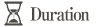
<style>
.page{position:relative;width:108px;height:27px;background:#ffffff}
.page>*{position:absolute;margin:0}
.t1{font:18px "RyuminPro-ExBold";letter-spacing:-0.08em;color:#4c4843;scale:0.9 1}
</style>
<div class="page">
<p class="t1" style="left:30px;top:7px;width:60px;height:14px">Duration</p>
</div>
